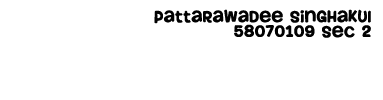
<style>
.page{position:relative;width:383px;height:100px;background:#ffffff}
.page>*{position:absolute;margin:0}
.t1{font:12.5px "Howser";letter-spacing:0.075em;color:#020202}
</style>
<div class="page">
<p class="t1" style="left:154px;top:9px;width:217px;height:29px;text-align:right">pattarawadee singhakul<br>58070109 sec 2</p>
</div>
